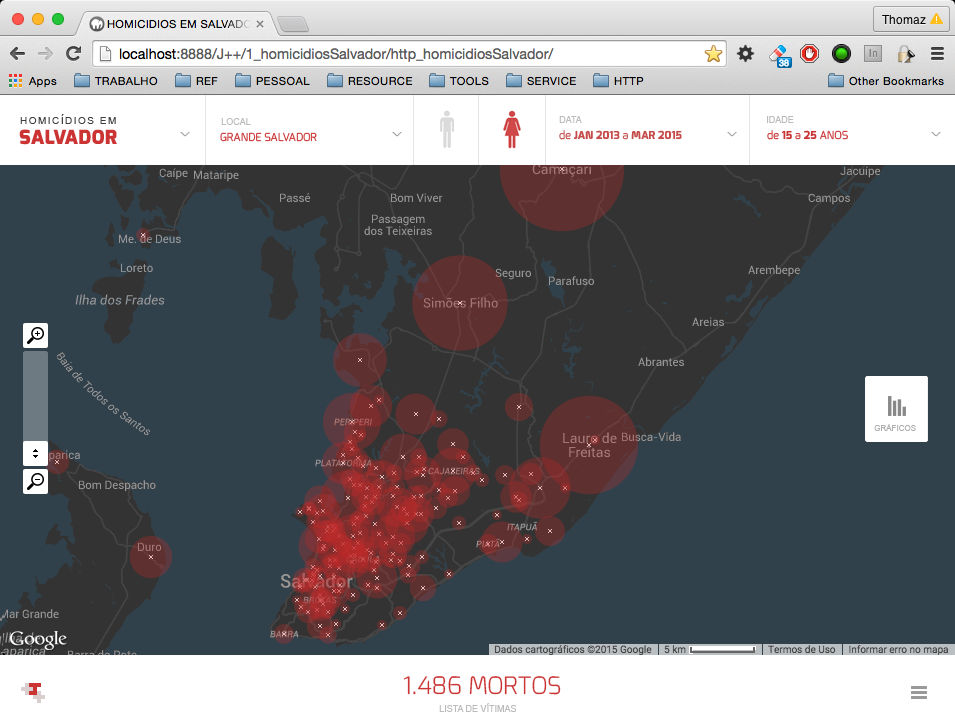
<style>
.page{position:relative;width:955px;height:725px;background:#31414b}
.page>*{position:absolute;margin:0}
.t1{font:10px "ArialMT";letter-spacing:0.15em;color:#3e3e3e}
.t2{font:9px "ArialMT";color:#bbbbbb}
.t3{font:19.6px "Exo-Black";letter-spacing:0.015em;color:#cc3434}
.t4{font:11px "Exo-Regular";color:#cc3434}
.t5{font:11px "Exo-ExtraBold";color:#c64b4b}
.t6{font:11px "Exo-Regular";color:#c64b4b}
.t7{font:11px "Exo-ExtraBold";color:#cc3434}
.t8{font:8px "ArialMT";color:#afafaf}
.t9{font:24px "Exo-Light";color:#cc3434}
</style>
<div class="page">
<p class="t1" style="left:20px;top:114px;width:96px;height:10px">HOMICÍDIOS EM</p>
<p class="t2" style="left:221px;top:118px;width:30px;height:7px">LOCAL</p>
<p class="t2" style="left:559px;top:116px;width:23px;height:7px">DATA</p>
<p class="t2" style="left:767px;top:116px;width:27px;height:7px">IDADE</p>
<p class="t3" style="left:19px;top:129px;width:98px;height:16px">SALVADOR</p>
<p class="t4" style="left:220px;top:132px;width:97px;height:10px">GRANDE SALVADOR</p>
<p class="t5" style="left:559px;top:130px;width:123px;height:10px"><span class="t6">de </span>JAN 2013<span class="t6"> a </span>MAR 2015</p>
<p class="t4" style="left:767px;top:130px;width:81px;height:10px">de <span class="t7">15 </span>a <span class="t7">25 </span>ANOS</p>
<p class="t8" style="left:874px;top:424px;width:42px;height:7px">GRÁFICOS</p>
<p class="t9" style="left:403px;top:676px;width:158px;height:19px">1.486 MORTOS</p>
<p class="t2" style="left:439px;top:703px;width:78px;height:9px">LISTA DE VÍTIMAS</p>
</div>
